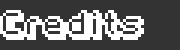
<style>
.page{position:relative;width:180px;height:50px;background:#333333}
.page>*{position:absolute;margin:0}
.t1{font:24px "Fipps-Regular";color:#ffffff}
</style>
<div class="page">
<p class="t1" style="left:0px;top:10px;width:144px;height:30px">Credits</p>
</div>
